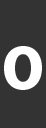
<style>
.page{position:relative;width:46px;height:128px;background:#333333}
.page>*{position:absolute;margin:0}
.t1{font:75px "AdobeGothicStd-Bold";color:#ffffff}
</style>
<div class="page">
<p class="t1" style="left:4px;top:46px;width:38px;height:44px">o</p>
</div>
